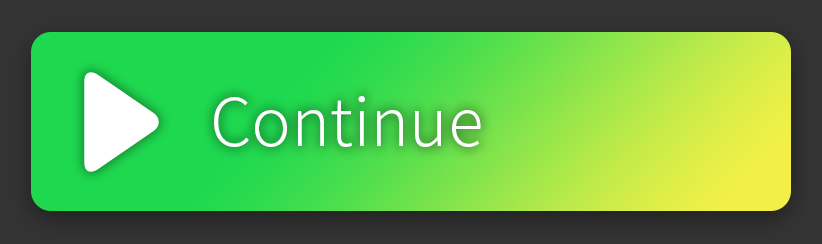
<style>
.page{position:relative;width:822px;height:244px}
.page>*{position:absolute;margin:0}
.t1{font:66px "NotoSansCJKkr-Light";color:#ffffff}
</style>
<div class="page">
<p class="t1" style="left:214px;top:96px;width:267px;height:51px">Continue</p>
</div>
